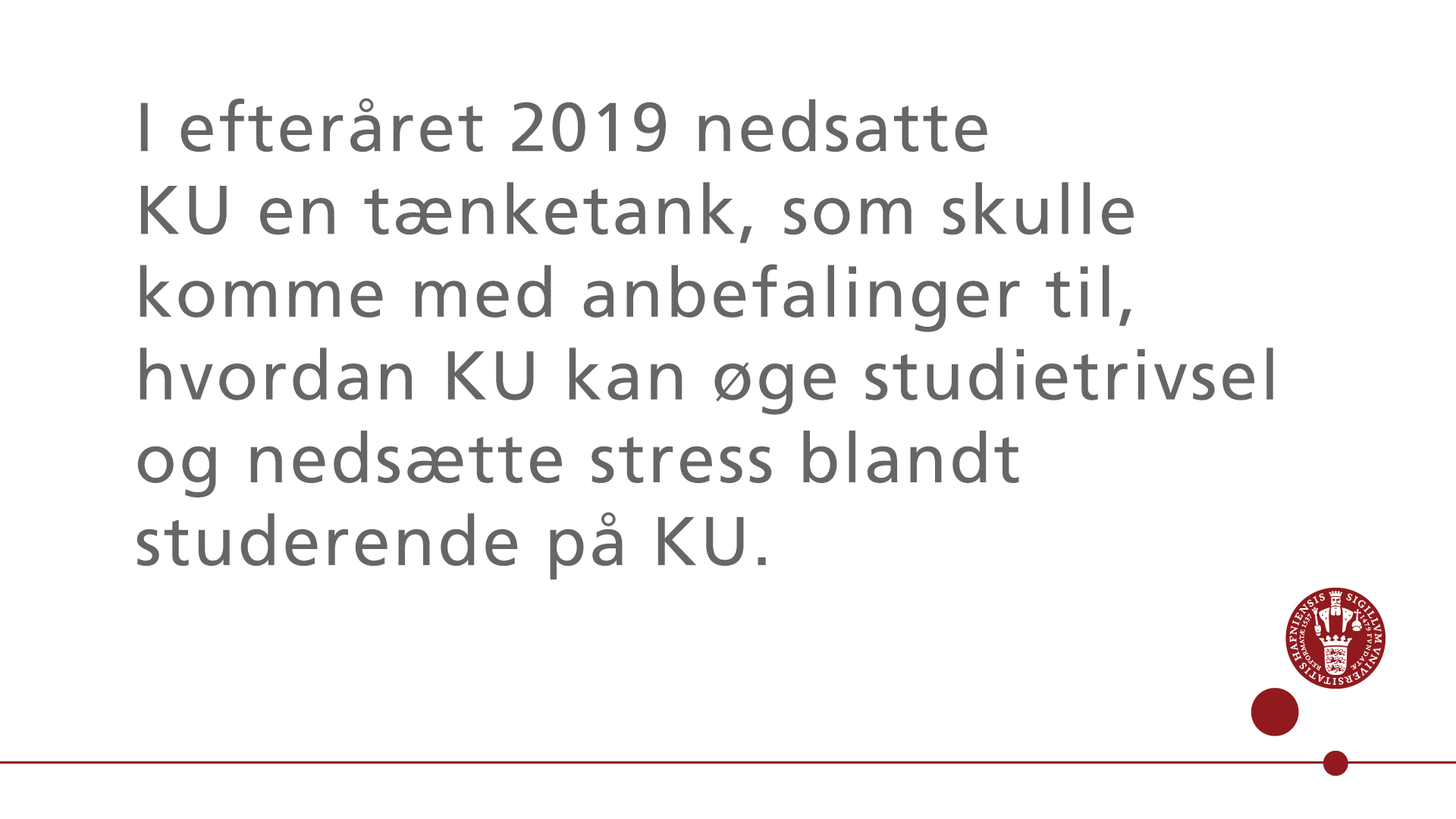
<style>
.page{position:relative;width:1456px;height:819px;background:#ffffff}
.page>*{position:absolute;margin:0}
.t1{font:69px "FrutigerLTStd-Roman";letter-spacing:0.035em;color:#666666}
</style>
<div class="page">
<p class="t1" style="left:136px;top:98px;width:1137px;height:482px">I efteråret 2019 nedsatte <br>KU en tænketank, som skulle komme med anbefalinger til, hvordan KU kan øge studietrivsel og nedsætte stress blandt <br>studerende på KU.</p>
</div>
